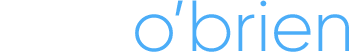
<style>
.page{position:relative;width:349px;height:52px;background:#ffffff}
.page>*{position:absolute;margin:0}
.t1{font:72px "Gilroy-Light";color:#4badf8}
.t2{font:72px "Gilroy-Light";color:#ffffff}
</style>
<div class="page">
<p class="t1" style="left:0px;top:0px;width:349px;height:52px"><span class="t2">bob</span>o’brien</p>
</div>
